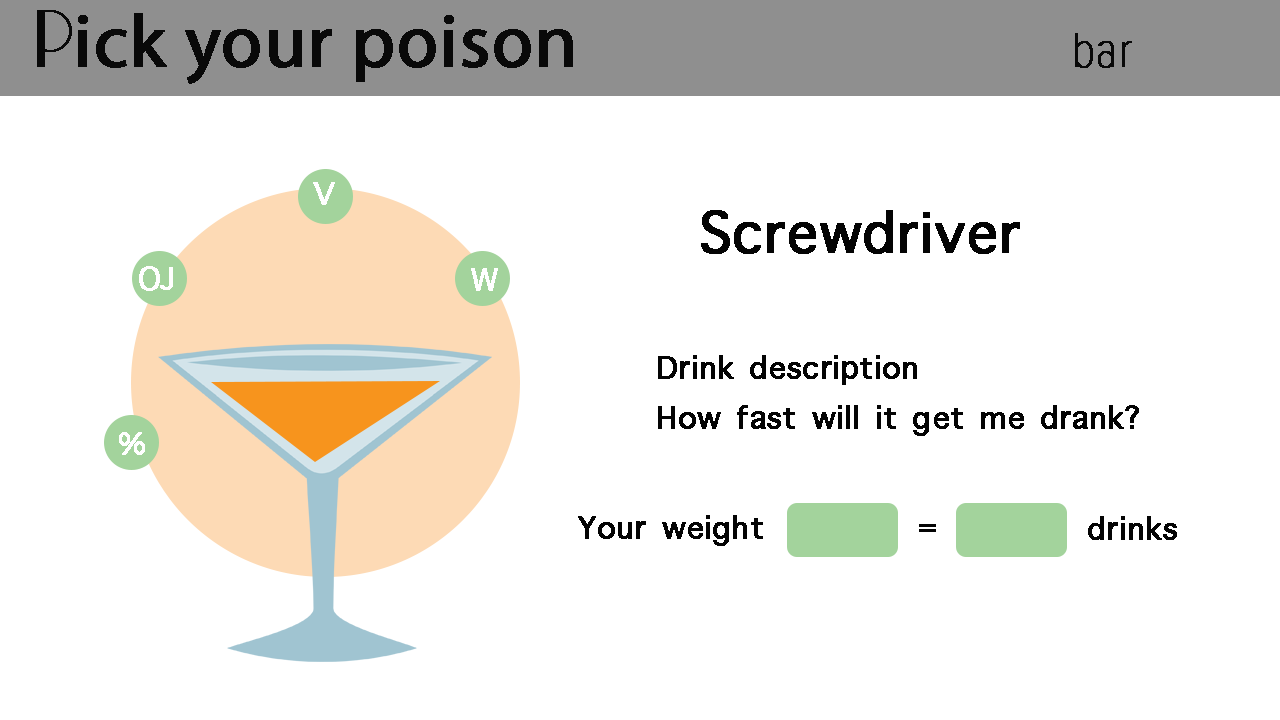
<style>
.page{position:relative;width:1280px;height:720px;background:#ffffff}
.page>*{position:absolute;margin:0}
.t1{font:75px "MyriadPro-Regular";color:#090909;font-weight:bold}
.t2{font:75px "Arwen-Regular";color:#090909;font-weight:bold}
.t3{font:50px "ProximaNovaCond-Thin";color:#090909;font-weight:bold}
.t4{font:41.7px "AppleSymbols";color:#ffffff;font-weight:bold}
.t5{font:75px "AppleSymbols";color:#040404;font-weight:bold}
.t6{font:41.7px "AppleSymbols";color:#040404;font-weight:bold}
</style>
<div class="page">
<p class="t1" style="left:37px;top:10px;width:536px;height:74px"><span class="t2">P</span>ick your poison</p>
<p class="t3" style="left:1075px;top:33px;width:57px;height:35px">bar</p>
<p class="t4" style="left:313px;top:182px;width:22px;height:23px">V</p>
<p class="t5" style="left:701px;top:210px;width:319px;height:44px">Screwdriver</p>
<p class="t4" style="left:139px;top:266px;width:34px;height:25px">OJ</p>
<p class="t4" style="left:471px;top:268px;width:27px;height:23px">W</p>
<p class="t6" style="left:658px;top:355px;width:481px;height:81px">Drink description<br>How fast will it get me drank?</p>
<p class="t4" style="left:119px;top:432px;width:26px;height:23px">%</p>
<p class="t6" style="left:578px;top:515px;width:185px;height:31px">Your weight</p>
<p class="t6" style="left:1088px;top:516px;width:89px;height:24px">drinks</p>
<p class="t6" style="left:919px;top:524px;width:17px;height:8px">=</p>
</div>
